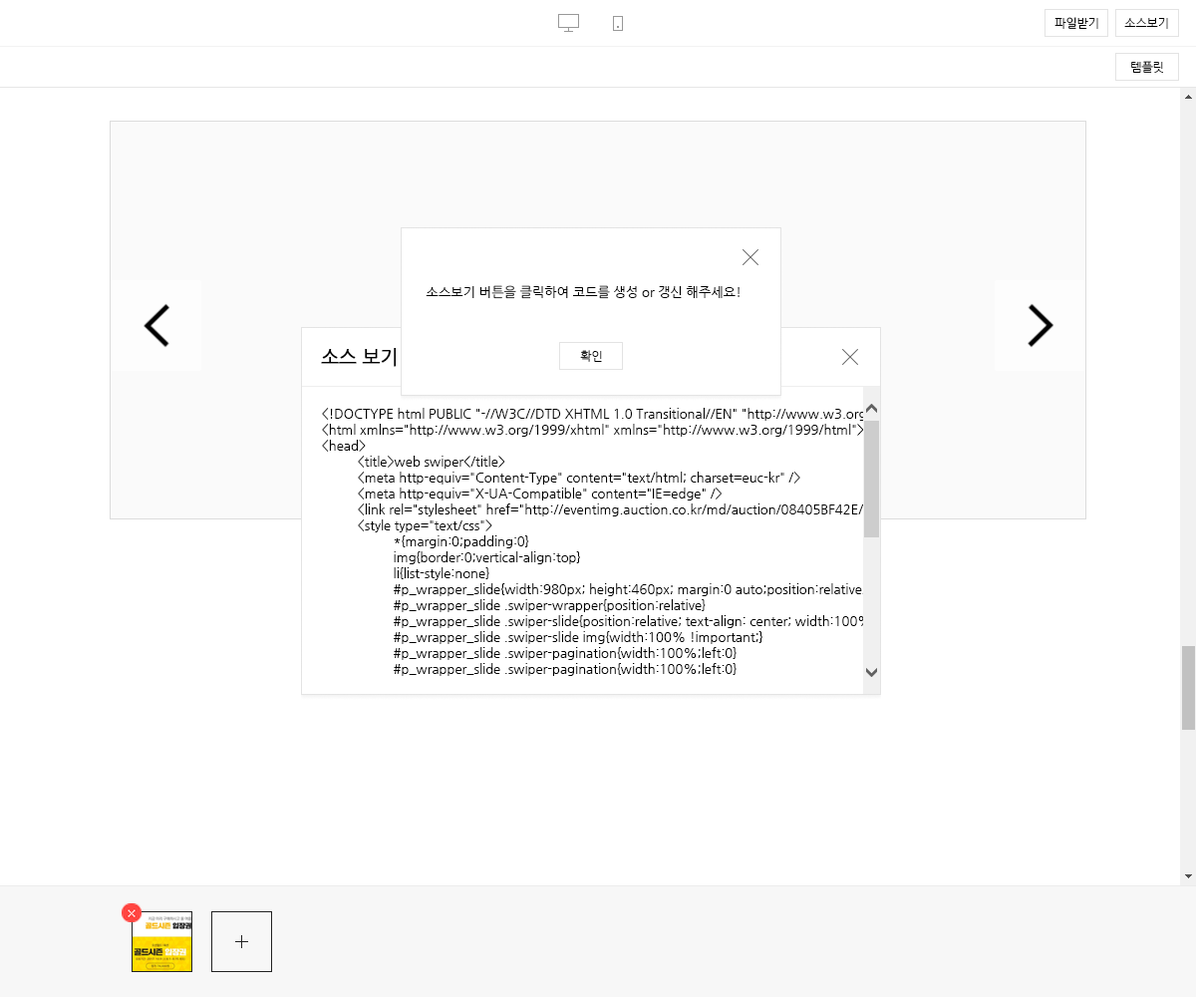
<style>
.page{position:relative;width:1196px;height:997px;background:#ffffff}
.page>*{position:absolute;margin:0}
.t1{font:12px "NanumGothic";letter-spacing:-0.01em;color:#000000}
.t2{font:13.3px "NanumGothic";letter-spacing:-0.01em;color:#000000}
.t3{font:18.6px "NanumGothic";letter-spacing:-0.01em;color:#000000;font-weight:bold}
</style>
<div class="page">
<p class="t1" style="left:1055px;top:17px;width:44px;height:12px">파일받기</p>
<p class="t1" style="left:1124px;top:18px;width:44px;height:11px">소스보기</p>
<p class="t1" style="left:1131px;top:61px;width:32px;height:12px">템플릿</p>
<p class="t2" style="left:426px;top:285px;width:314px;height:14px">소스보기 버튼을 클릭하여 코드를 생성 or 갱신 해주세요!</p>
<p class="t3" style="left:321px;top:348px;width:76px;height:19px">소스 보기</p>
<p class="t1" style="left:580px;top:350px;width:22px;height:12px">확인</p>
<p class="t2" style="left:322px;top:408px;width:548px;height:268px">&lt;!DOCTYPE html PUBLIC "-//W3C//DTD XHTML 1.0 Transitional//EN" "http://www.w3.org<br>    &lt;html xmlns="http://www.w3.org/1999/xhtml" xmlns="http://www.w3.org/1999/html"&gt;<br>    &lt;head&gt;<br>     &lt;title&gt;web swiper&lt;/title&gt;<br>     &lt;meta http-equiv="Content-Type" content="text/html; charset=euc-kr" /&gt;<br>     &lt;meta http-equiv="X-UA-Compatible" content="IE=edge" /&gt;<br>     &lt;link rel="stylesheet" href="http://eventimg.auction.co.kr/md/auction/08405BF42E/<br>     &lt;style type="text/css"&gt;<br>      *{margin:0;padding:0}<br>      img{border:0;vertical-align:top}<br>      li{list-style:none}     <br>      #p_wrapper_slide{width:980px; height:460px; margin:0 auto;position:relative; <br>      #p_wrapper_slide .swiper-wrapper{position:relative}<br>      #p_wrapper_slide .swiper-slide{position:relative; text-align: center; width:100%<br>      #p_wrapper_slide .swiper-slide img{width:100% !important;}<br>      #p_wrapper_slide .swiper-pagination{width:100%;left:0}<br>      #p_wrapper_slide .swiper-pagination{width:100%;left:0}</p>
</div>
